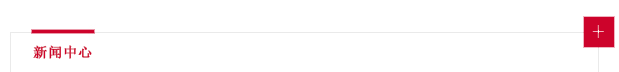
<style>
.page{position:relative;width:619px;height:72px;background:#ffffff}
.page>*{position:absolute;margin:0}
.t1{font:14px "SimSun";letter-spacing:0.04em;color:#cd032b;font-weight:bold}
</style>
<div class="page">
<p class="t1" style="left:33px;top:45px;width:59px;height:14px">新闻中心</p>
</div>
